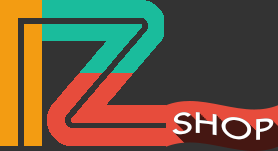
<style>
.page{position:relative;width:278px;height:151px;background:#333333}
.page>*{position:absolute;margin:0}
.t1{font:33.3px "TwCenMT-Regular";color:#ffffff;scale:1.32 1}
</style>
<div class="page">
<p class="t1" style="left:172px;top:112px;width:102px;height:28px">SHOP</p>
</div>
